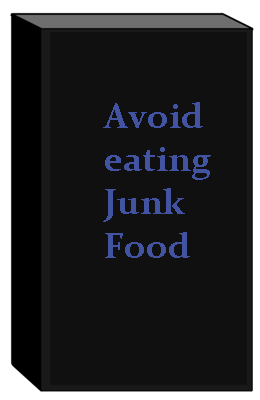
<style>
.page{position:relative;width:260px;height:400px;background:#101010}
.page>*{position:absolute;margin:0}
.t1{font:36px "Constantia-Bold";color:#4254a1}
</style>
<div class="page">
<p class="t1" style="left:103px;top:102px;width:108px;height:156px">Avoid<br>eating<br>Junk <br>Food</p>
</div>
